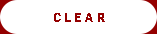
<style>
.page{position:relative;width:157px;height:34px;background:#ffffff}
.page>*{position:absolute;margin:0}
.t1{font:14.1px "WorkSansRoman-Bold";letter-spacing:0.3em;color:#940000;scale:0.82 1}
</style>
<div class="page">
<p class="t1" style="left:54px;top:13px;width:51px;height:9px">CLEAR</p>
</div>
